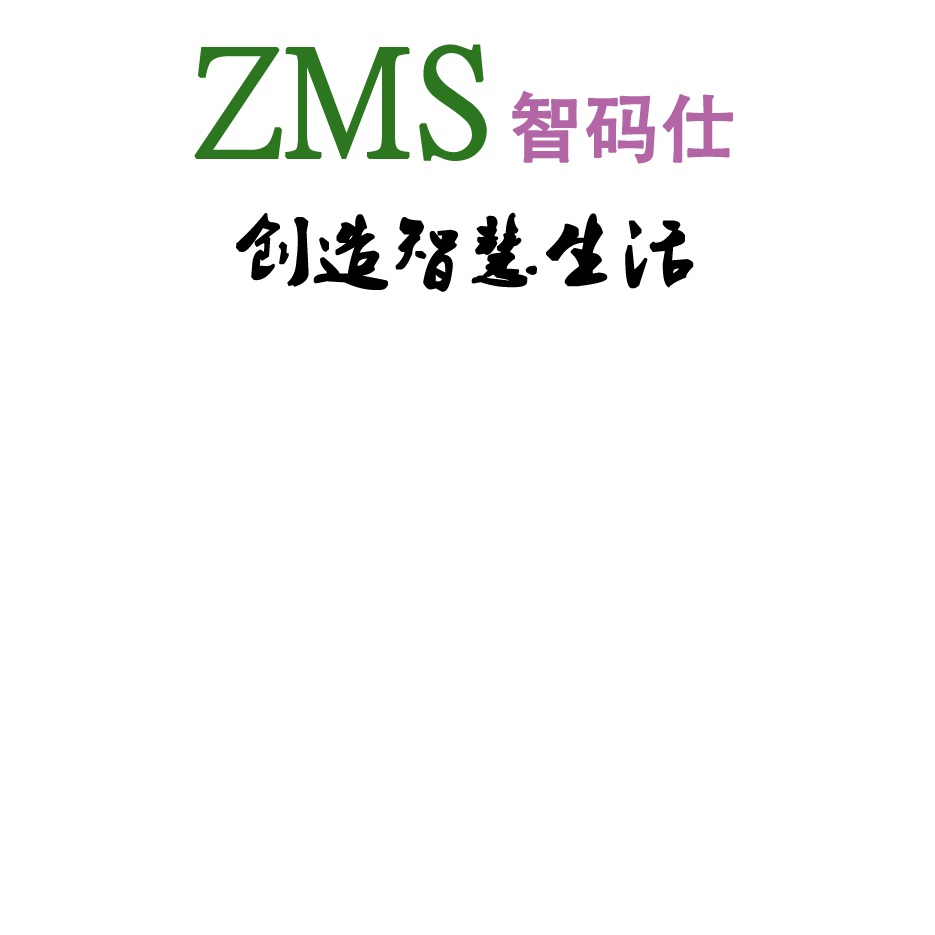
<style>
.page{position:relative;width:935px;height:935px;background:#ffffff}
.page>*{position:absolute;margin:0}
.t1{font:150px "PMingLiU-ExtB";color:#2d7620;font-weight:bold}
.t2{font:75px "AdobeHeitiStd-Regular";color:#b366a6;font-weight:bold}
.t3{font:75px "2.0-";color:#000000;font-weight:bold}
</style>
<div class="page">
<p class="t1" style="left:194px;top:44px;width:293px;height:117px">ZMS</p>
<p class="t2" style="left:512px;top:91px;width:221px;height:73px">智码仕</p>
<p class="t3" style="left:236px;top:212px;width:458px;height:80px">创造智慧生活</p>
</div>
